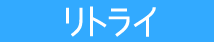
<style>
.page{position:relative;width:214px;height:42px;background:#32aaff}
.page>*{position:absolute;margin:0}
.t1{font:36px "SmartFontUI-Proportional";color:#ffffff}
</style>
<div class="page">
<p class="t1" style="left:66px;top:6px;width:90px;height:31px">リトライ</p>
</div>
